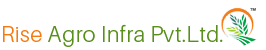
<style>
.page{position:relative;width:266px;height:50px;background:#ffffff}
.page>*{position:absolute;margin:0}
.t1{font:22px "Aileron-Light";letter-spacing:0.025em;color:#598f1b}
.t2{font:22px "Aileron-Light";letter-spacing:0.025em;color:#f57a11}
</style>
<div class="page">
<p class="t1" style="left:3px;top:24px;width:220px;height:23px"><span class="t2">Rise </span>Agro Infra Pvt.Ltd.</p>
</div>
